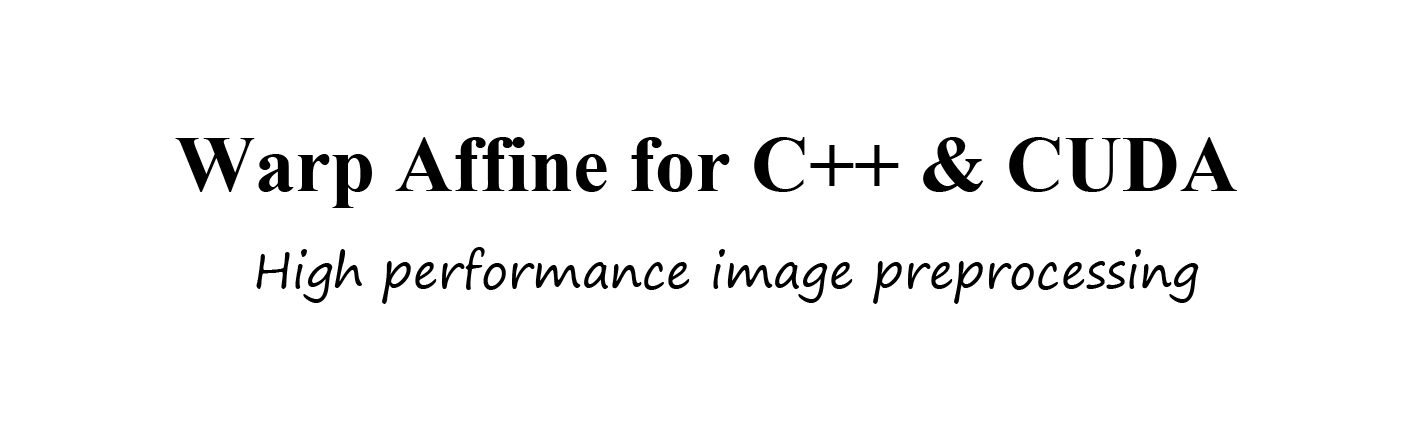
<style>
.page{position:relative;width:1417px;height:425px;background:#ffffff}
.page>*{position:absolute;margin:0}
.t1{font:80px "TimesNewRomanPS-BoldMT";color:#000000}
.t2{font:48px "SegoePrint";color:#000000}
</style>
<div class="page">
<p class="t1" style="left:175px;top:137px;width:1062px;height:71px">Warp Affine for C++ &amp; CUDA</p>
<p class="t2" style="left:256px;top:247px;width:943px;height:57px">High performance image preprocessing</p>
</div>
